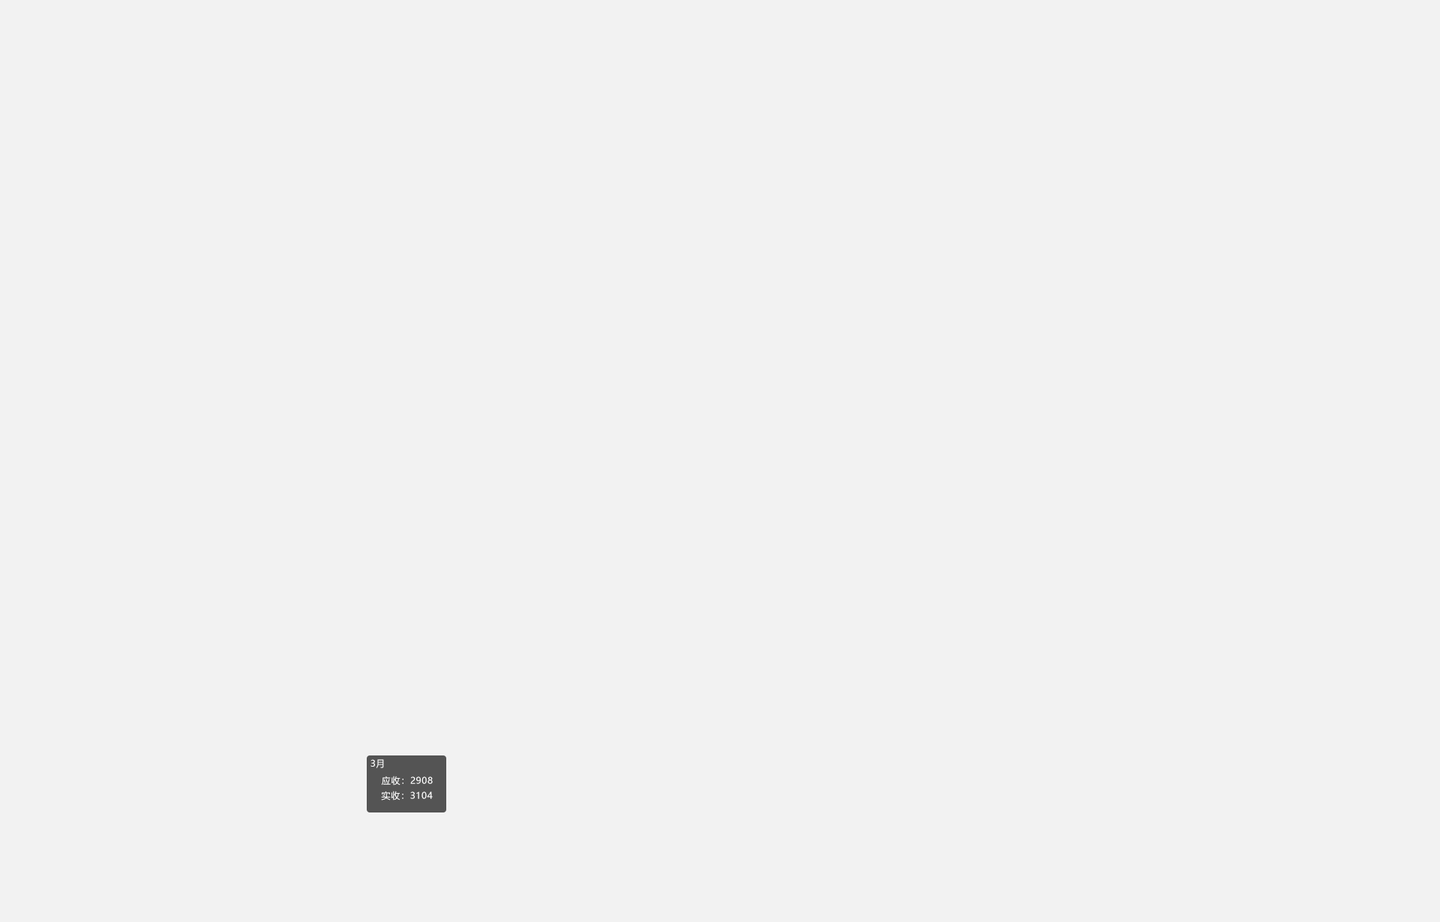
<style>
.page{position:relative;width:1440px;height:922px;background:#f2f2f2}
.page>*{position:absolute;margin:0}
.t1{font:9px "MicrosoftYaHei";letter-spacing:0.06em;color:#ffffff}
</style>
<div class="page">
<p class="t1" style="left:370px;top:759px;width:14px;height:9px">3月</p>
<p class="t1" style="left:381px;top:776px;width:52px;height:9px">应收：2908</p>
<p class="t1" style="left:381px;top:790px;width:52px;height:10px">实收：3104</p>
</div>
